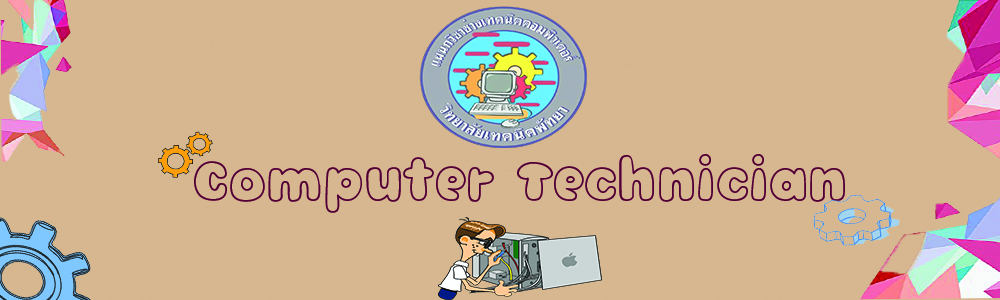
<style>
.page{position:relative;width:1000px;height:300px;background:#d6b78f}
.page>*{position:absolute;margin:0}
.t1{font:80px "FCOnigiriOutlineColor";color:#4f0035}
</style>
<div class="page">
<p class="t1" style="left:194px;top:154px;width:651px;height:59px">Computer Technician</p>
</div>
